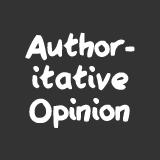
<style>
.page{position:relative;width:160px;height:160px;background:#333333}
.page>*{position:absolute;margin:0}
.t1{font:35.9px/31.9px "QAReports";color:#ffffff}
</style>
<div class="page">
<p class="t1" style="left:25px;top:32px;width:110px;height:96px;text-align:center">Author-<br>itative<br>Opinion</p>
</div>
